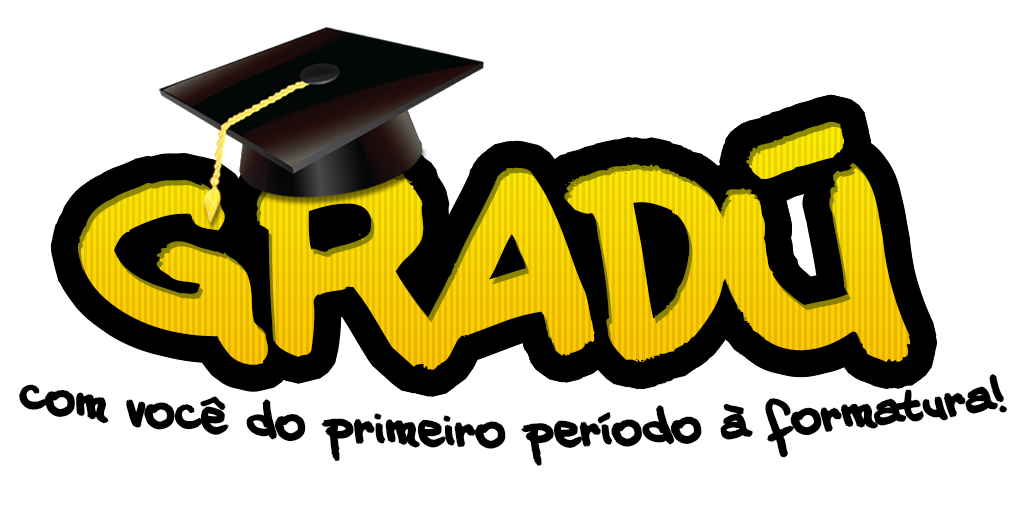
<style>
.page{position:relative;width:1021px;height:531px;background:#ffffff}
.page>*{position:absolute;margin:0}
.t1{font:258px "20CENTSMARKER-Bold"}
.t2{font:45.3px "20CENTSMARKER-Bold";color:#000000}
</style>
<div class="page">
<p class="t1" style="left:77px;top:121px;width:834px;height:249px">GRADÚ</p>
<p class="t2" style="left:19px;top:374px;width:988px;height:92px;text-align:center">com você do primeiro período à formatura!</p>
</div>
